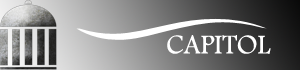
<style>
.page{position:relative;width:300px;height:70px}
.page>*{position:absolute;margin:0}
.t1{font:28px "FootlightMTLight";color:#ffffff}
</style>
<div class="page">
<p class="t1" style="left:167px;top:35px;width:104px;height:19px">CAPITOL</p>
</div>
